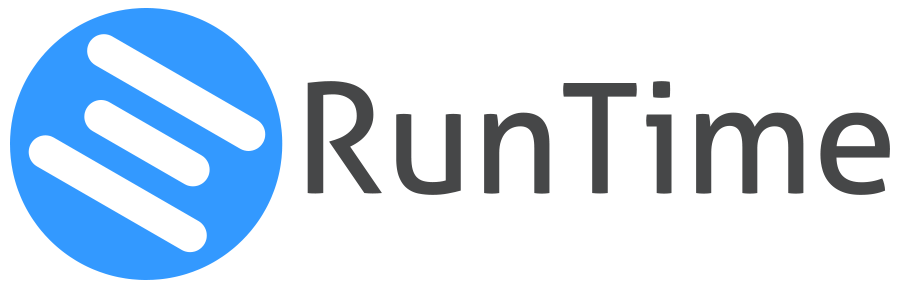
<style>
.page{position:relative;width:904px;height:291px;background:#ffffff}
.page>*{position:absolute;margin:0}
.t1{font:152.6px "Aller";color:#464748}
</style>
<div class="page">
<p class="t1" style="left:307px;top:81px;width:583px;height:114px">RunTime</p>
</div>
